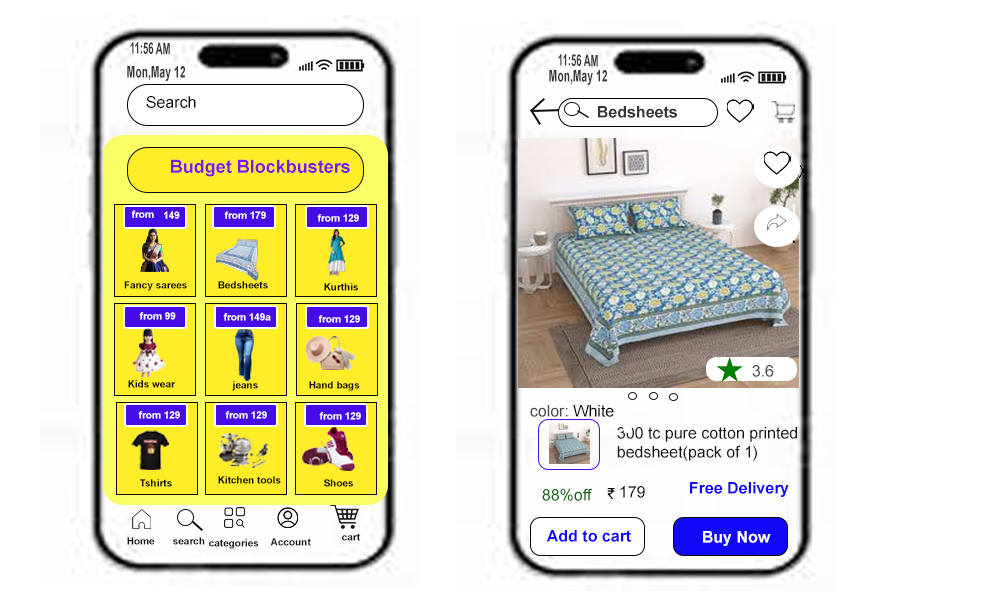
<style>
.page{position:relative;width:1000px;height:600px;background:#ffffff}
.page>*{position:absolute;margin:0}
.t1{font:16px "Arial-BoldMT";color:#353535;scale:0.59 1}
.t2{font:16px "Arial-BoldMT";color:#353535;scale:0.65 1}
.t3{font:16px "ArialMT";color:#0b0101}
.t4{font:16px "Arial-BoldMT";color:#353535}
.t5{font:18px "Arial-BoldMT";color:#7c18ec}
.t6{font:10px "Arial-BoldMT";color:#ffffff}
.t7{font:10px "Arial-BoldMT";color:#0a0903}
.t8{font:10px "Arial-BoldMT";color:#050101}
.t9{font:16px "ArialMT";color:#484444}
.t10{font:16px "ArialMT";color:#090404}
.t11{font:16px "ArialMT";color:#171414}
.t12{font:16px "ArialMT";color:#040c04}
.t13{font:16px "Arial-BoldMT";color:#1308f5}
.t14{font:16px "ArialMT";color:#0b6309}
.t15{font:10px "Arial-BoldMT";color:#171414}
.t16{font:16px "Arial-BoldMT";color:#fafafb}
</style>
<div class="page">
<p class="t1" style="left:130px;top:42px;width:40px;height:13px;rotate:1deg">11:56 AM</p>
<p class="t1" style="left:558px;top:54px;width:40px;height:13px;rotate:1deg">11:56 AM</p>
<p class="t2" style="left:127px;top:66px;width:58px;height:15px">Mon,May 12</p>
<p class="t2" style="left:549px;top:70px;width:58px;height:15px">Mon,May 12</p>
<p class="t3" style="left:146px;top:96px;width:50px;height:12px">Search</p>
<p class="t4" style="left:598px;top:106px;width:79px;height:12px">Bedsheets</p>
<p class="t5" style="left:171px;top:159px;width:179px;height:18px">Budget Blockbusters</p>
<p class="t6" style="left:131px;top:210px;width:23px;height:8px">from</p>
<p class="t6" style="left:164px;top:211px;width:16px;height:8px">149</p>
<p class="t6" style="left:224px;top:211px;width:42px;height:8px">from 179</p>
<p class="t6" style="left:317px;top:214px;width:42px;height:8px">from 129</p>
<p class="t7" style="left:124px;top:281px;width:63px;height:10px">Fancy sarees</p>
<p class="t8" style="left:218px;top:281px;width:50px;height:8px">Bedsheets</p>
<p class="t8" style="left:324px;top:283px;width:34px;height:8px">Kurthis</p>
<p class="t6" style="left:139px;top:312px;width:37px;height:8px">from 99</p>
<p class="t6" style="left:223px;top:313px;width:48px;height:8px">from 149a</p>
<p class="t6" style="left:318px;top:315px;width:42px;height:8px">from 129</p>
<p class="t9" style="left:752px;top:365px;width:22px;height:12px">3.6</p>
<p class="t8" style="left:128px;top:380px;width:48px;height:8px">Kids wear</p>
<p class="t8" style="left:232px;top:381px;width:26px;height:10px">jeans</p>
<p class="t8" style="left:309px;top:381px;width:51px;height:10px">Hand bags</p>
<p class="t6" style="left:138px;top:411px;width:42px;height:8px">from 129</p>
<p class="t6" style="left:225px;top:411px;width:42px;height:8px">from 129</p>
<p class="t6" style="left:319px;top:412px;width:42px;height:8px">from 129</p>
<p class="t9" style="left:530px;top:405px;width:84px;height:12px">color: <span class="t10">White</span></p>
<p class="t11" style="left:617px;top:427px;width:180px;height:34px">300 tc pure cotton printed<br>bedsheet(pack of 1)</p>
<p class="t8" style="left:140px;top:479px;width:32px;height:8px">Tshirts</p>
<p class="t8" style="left:218px;top:476px;width:63px;height:8px">Kitchen tools</p>
<p class="t8" style="left:324px;top:479px;width:29px;height:8px">Shoes</p>
<p class="t12" style="left:620px;top:486px;width:25px;height:12px">179</p>
<p class="t13" style="left:690px;top:482px;width:99px;height:15px">Free Delivery</p>
<p class="t14" style="left:542px;top:488px;width:50px;height:13px">88%off</p>
<p class="t15" style="left:342px;top:533px;width:18px;height:8px">cart</p>
<p class="t13" style="left:546px;top:530px;width:85px;height:12px">Add to cart</p>
<p class="t16" style="left:703px;top:531px;width:68px;height:15px">Buy Now</p>
<p class="t15" style="left:127px;top:537px;width:28px;height:8px">Home</p>
<p class="t15" style="left:173px;top:537px;width:32px;height:8px">search</p>
<p class="t15" style="left:209px;top:539px;width:50px;height:10px">categories</p>
<p class="t15" style="left:270px;top:538px;width:41px;height:8px">Account</p>
</div>
